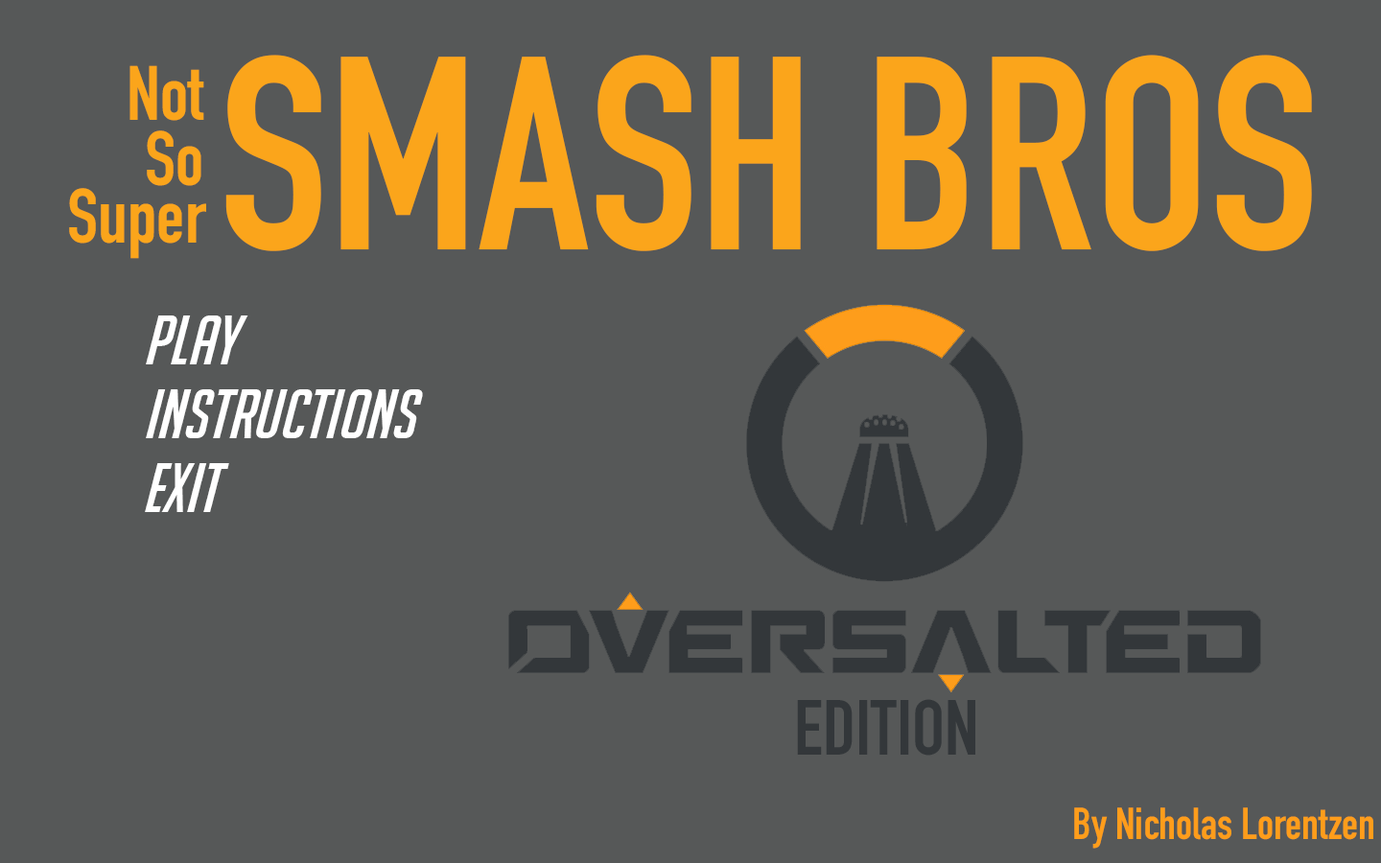
<style>
.page{position:relative;width:1381px;height:863px;background:#565858}
.page>*{position:absolute;margin:0}
.t1{font:75.8px "DINCondensed-Bold";color:#fba51b}
.t2{font:270.5px "DINCondensed-Bold";color:#fba51b}
.t3{font:68.1px "BigNoodleTooOblique";color:#ffffff}
.t4{font:76.7px "DINCondensed-Bold";color:#33373a}
.t5{font:44.1px "DINCondensed-Bold";color:#fe9d1b}
</style>
<div class="page">
<p class="t1" style="left:129px;top:65px;width:75px;height:56px">Not</p>
<p class="t2" style="left:225px;top:55px;width:1087px;height:196px">SMASH BROS</p>
<p class="t1" style="left:147px;top:130px;width:54px;height:56px">So</p>
<p class="t1" style="left:69px;top:188px;width:137px;height:71px">Super</p>
<p class="t3" style="left:146px;top:316px;width:102px;height:49px">Play</p>
<p class="t3" style="left:146px;top:389px;width:277px;height:49px">Instructions</p>
<p class="t3" style="left:145px;top:463px;width:84px;height:49px">EXIT</p>
<p class="t4" style="left:797px;top:699px;width:179px;height:57px">EDITION</p>
<p class="t5" style="left:1074px;top:808px;width:300px;height:41px">By Nicholas Lorentzen</p>
</div>
